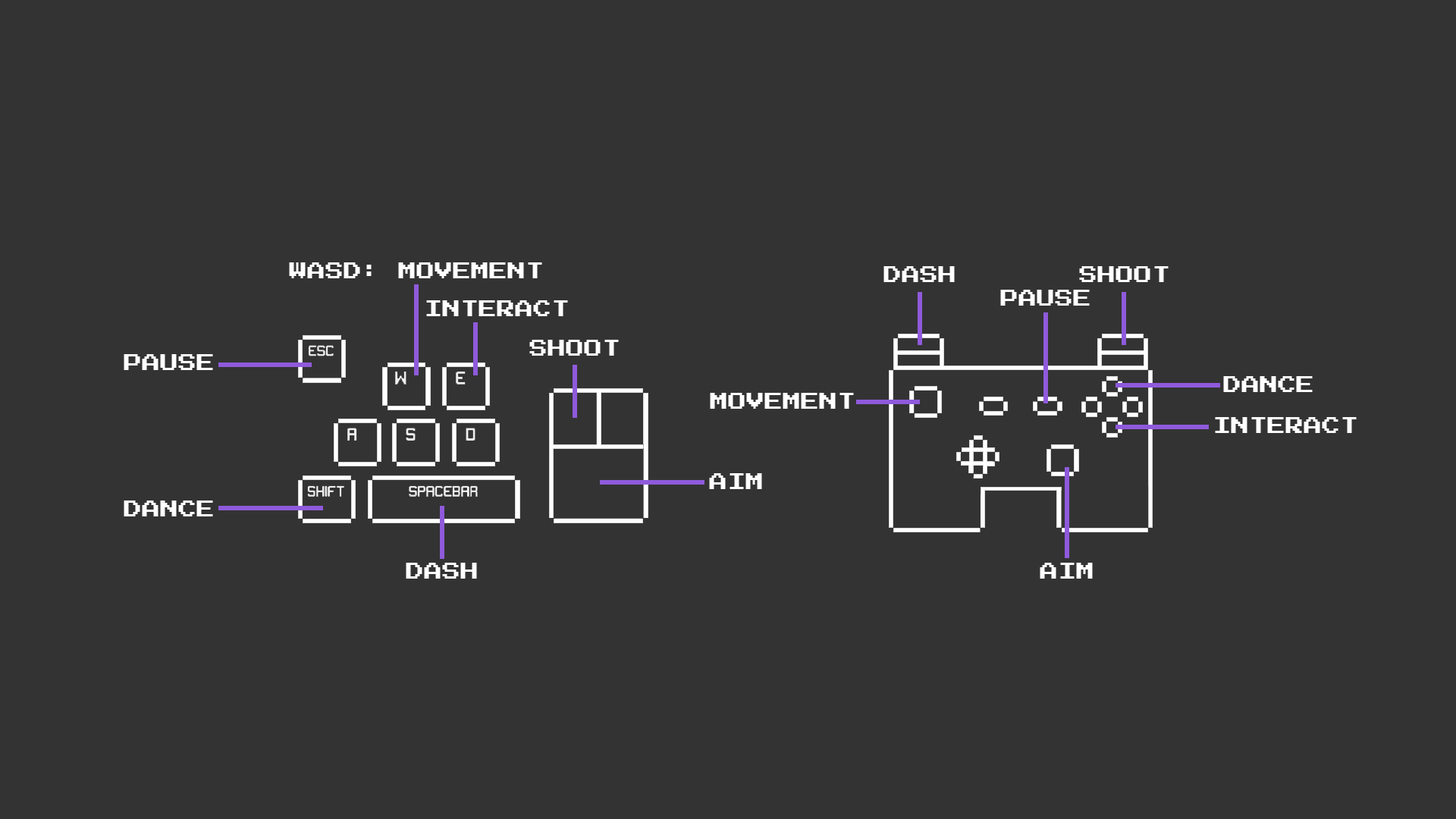
<style>
.page{position:relative;width:1456px;height:819px;background:#333333}
.page>*{position:absolute;margin:0}
.t1{font:18.2px "PressStart2P-Regular";color:#ffffff}
</style>
<div class="page">
<p class="t1" style="left:289px;top:262px;width:253px;height:16px">WASD: MOVEMENT</p>
<p class="t1" style="left:883px;top:266px;width:72px;height:16px">DASH</p>
<p class="t1" style="left:1079px;top:266px;width:90px;height:16px">SHOOT</p>
<p class="t1" style="left:1000px;top:290px;width:90px;height:16px">PAUSE</p>
<p class="t1" style="left:426px;top:300px;width:142px;height:16px">INTERACT</p>
<p class="t1" style="left:529px;top:340px;width:90px;height:16px">SHOOT</p>
<p class="t1" style="left:124px;top:354px;width:89px;height:16px">PAUSE</p>
<p class="t1" style="left:1223px;top:376px;width:90px;height:16px">DANCE</p>
<p class="t1" style="left:710px;top:393px;width:144px;height:16px">MOVEMENT</p>
<p class="t1" style="left:1215px;top:417px;width:142px;height:16px">INTERACT</p>
<p class="t1" style="left:709px;top:473px;width:53px;height:16px">AIM</p>
<p class="t1" style="left:124px;top:500px;width:89px;height:16px">DANCE</p>
<p class="t1" style="left:406px;top:563px;width:71px;height:16px">DASH</p>
<p class="t1" style="left:1040px;top:563px;width:53px;height:16px">AIM</p>
</div>
